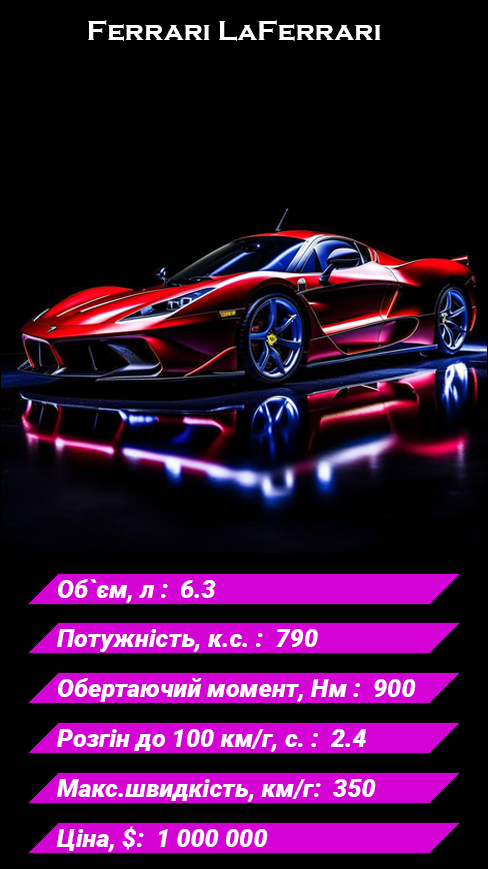
<style>
.page{position:relative;width:488px;height:869px;background:#000000}
.page>*{position:absolute;margin:0}
.t1{font:28px "CopperplateGothic-Bold";color:#ffffff}
.t2{font:25px "Roboto-BlackItalic";color:#ffffff}
</style>
<div class="page">
<p class="t1" style="left:88px;top:20px;width:293px;height:21px">Ferrari LaFerrari</p>
<p class="t2" style="left:58px;top:579px;width:158px;height:24px">Об`єм, л :  6.3</p>
<p class="t2" style="left:57px;top:629px;width:261px;height:23px">Потужність, к.с. :  790</p>
<p class="t2" style="left:58px;top:678px;width:358px;height:24px">Обертаючий момент, Нм :  900</p>
<p class="t2" style="left:57px;top:729px;width:309px;height:23px">Розгін до 100 км/г, с. :  2.4</p>
<p class="t2" style="left:57px;top:779px;width:319px;height:23px">Макс.швидкість, км/г:  350</p>
<p class="t2" style="left:56px;top:826px;width:212px;height:26px">Ціна, $:  1 000 000</p>
</div>
